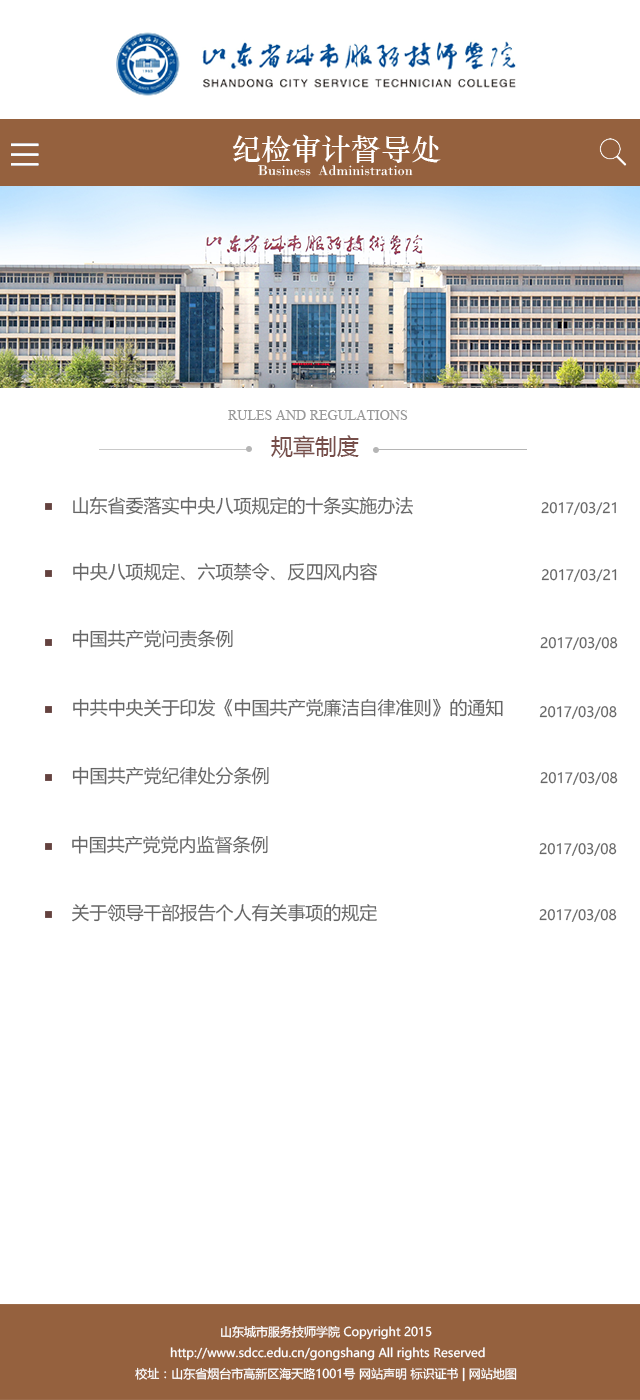
<style>
.page{position:relative;width:640px;height:1400px;background:#ffffff}
.page>*{position:absolute;margin:0}
.t1{font:30px "STZhongsong";color:#ffffff}
.t2{font:14.7px "BodoniMT";color:#ffffff}
.t3{font:14px "TimesNewRomanPSMT";color:#999999;text-transform:uppercase}
.t4{font:22px "MicrosoftYaHei";color:#774f4b}
.t5{font:18px "MicrosoftYaHei";color:#666666}
.t6{font:14px "MicrosoftYaHei";color:#666666}
.t7{font:12px "MicrosoftYaHei";color:#ffffff}
</style>
<div class="page">
<p class="t1" style="left:232px;top:134px;width:209px;height:29px">纪检审计督导处</p>
<p class="t2" style="left:258px;top:165px;width:155px;height:11px">Business  Administration  School</p>
<p class="t3" style="left:228px;top:410px;width:180px;height:10px">rules and regulations</p>
<p class="t4" style="left:271px;top:435px;width:88px;height:23px">规章制度</p>
<p class="t5" style="left:73px;top:496px;width:340px;height:19px">山东省委落实中央八项规定的十条实施办法</p>
<p class="t6" style="left:541px;top:502px;width:75px;height:13px">2017/03/21</p>
<p class="t5" style="left:73px;top:562px;width:305px;height:19px">中央八项规定、六项禁令、反四风内容</p>
<p class="t6" style="left:541px;top:569px;width:76px;height:13px">2017/03/21</p>
<p class="t5" style="left:72px;top:629px;width:161px;height:19px">中国共产党问责条例</p>
<p class="t6" style="left:540px;top:637px;width:78px;height:13px">2017/03/08</p>
<p class="t5" style="left:73px;top:698px;width:430px;height:19px">中共中央关于印发《中国共产党廉洁自律准则》的通知</p>
<p class="t6" style="left:539px;top:706px;width:78px;height:13px">2017/03/08</p>
<p class="t5" style="left:72px;top:766px;width:197px;height:19px">中国共产党纪律处分条例</p>
<p class="t6" style="left:540px;top:772px;width:78px;height:13px">2017/03/08</p>
<p class="t5" style="left:72px;top:835px;width:196px;height:19px">中国共产党党内监督条例</p>
<p class="t6" style="left:539px;top:843px;width:78px;height:13px">2017/03/08</p>
<p class="t5" style="left:72px;top:903px;width:305px;height:19px">关于领导干部报告个人有关事项的规定</p>
<p class="t6" style="left:539px;top:909px;width:78px;height:13px">2017/03/08</p>
<p class="t7" style="left:135px;top:1325px;width:382px;height:57px;text-align:center">山东城市服务技师学院 Copyright 2015<br> http://www.sdcc.edu.cn/gongshang All rights Reserved<br>校址：山东省烟台市高新区海天路1001号 网站声明 标识证书 | 网站地图</p>
</div>
